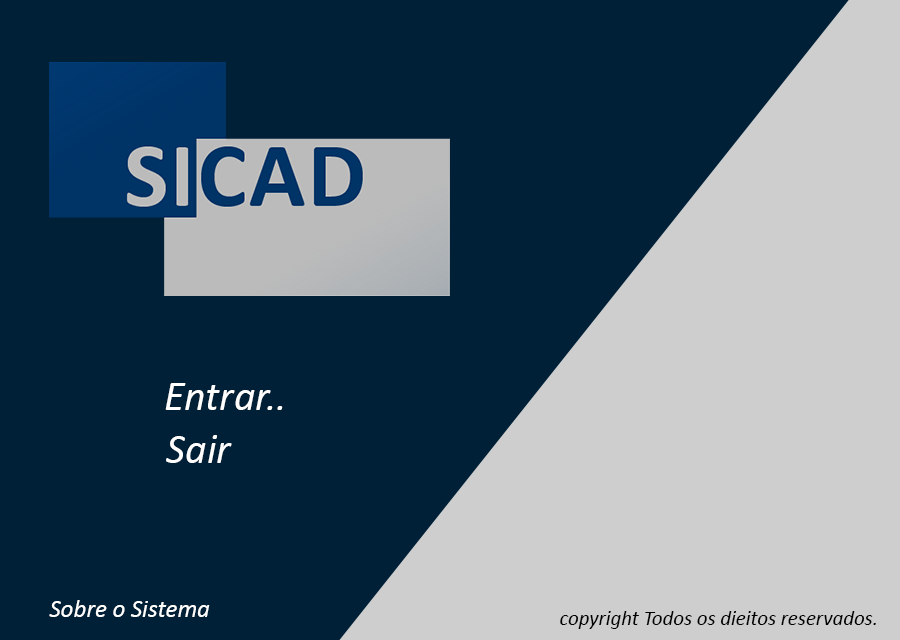
<style>
.page{position:relative;width:900px;height:640px;background:#002037}
.page>*{position:absolute;margin:0}
.t1{font:41.7px "Calibri-Italic";color:#ffffff}
.t2{font:25px "Calibri-Italic";color:#ffffff}
.t3{font:20.8px "Calibri-Italic";color:#000000}
</style>
<div class="page">
<p class="t1" style="left:165px;top:383px;width:118px;height:27px">Entrar..</p>
<p class="t1" style="left:166px;top:435px;width:66px;height:28px">Sair</p>
<p class="t2" style="left:49px;top:600px;width:161px;height:17px">Sobre o Sistema</p>
<p class="t3" style="left:560px;top:611px;width:316px;height:18px">copyright Todos os dieitos reservados.</p>
</div>
